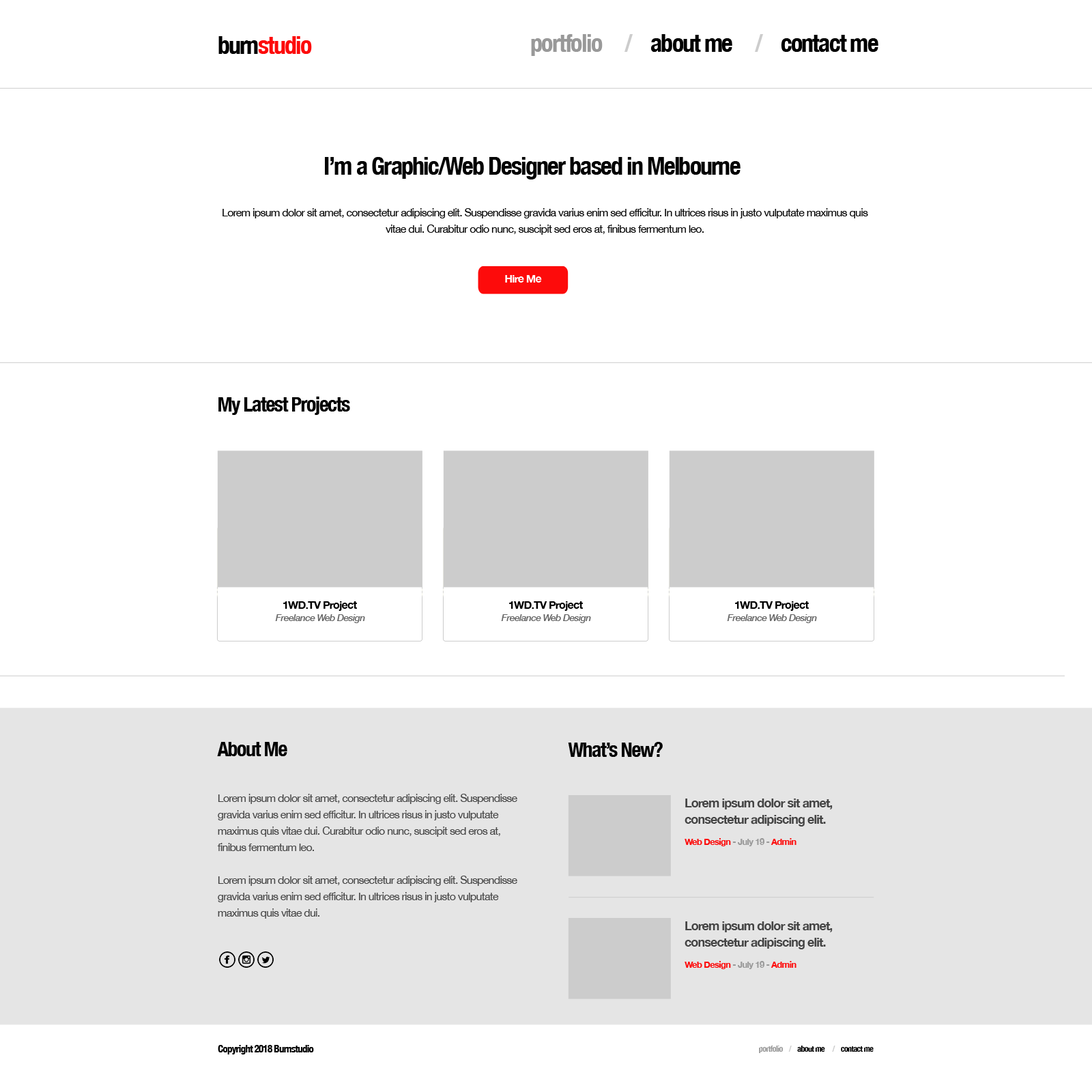
<style>
.page{position:relative;width:1092px;height:1092px;background:#ffffff}
.page>*{position:absolute;margin:0}
.t1{font:24.6px "HelveticaNeue-CondensedBold";letter-spacing:-0.05em;color:#fd0b0b}
.t2{font:24.6px "HelveticaNeue-CondensedBold";letter-spacing:-0.05em;color:#000000}
.t3{font:24.6px "HelveticaNeue-CondensedBold";letter-spacing:-0.05em;color:#999999}
.t4{font:24.6px "HelveticaNeue-CondensedBold";letter-spacing:-0.05em;color:#cccccc}
.t5{font:24.6px "HelveticaNeue-CondensedBold";letter-spacing:-0.05em;color:#020202}
.t6{font:10.9px/16.4px "HelveticaNeue";letter-spacing:-0.05em;color:#020202}
.t7{font:10.9px "HelveticaNeue-Bold";letter-spacing:-0.05em;color:#ffffff}
.t8{font:20.5px "HelveticaNeue-CondensedBold";letter-spacing:-0.05em;color:#020202}
.t9{font:10.9px "HelveticaNeue-Bold";letter-spacing:-0.05em;color:#000000}
.t10{font:9.6px "HelveticaNeue-MediumItalic";letter-spacing:-0.05em;color:#666666}
.t11{font:10.9px/16.4px "HelveticaNeue";letter-spacing:-0.05em;color:#444444}
.t12{font:12.3px/16.4px "HelveticaNeue-Bold";letter-spacing:-0.05em;color:#444444}
.t13{font:8.9px "HelveticaNeue-Bold";letter-spacing:-0.05em;color:#999999}
.t14{font:8.9px "HelveticaNeue-Bold";letter-spacing:-0.05em;color:#fd0b0b}
.t15{font:10.2px "HelveticaNeue-CondensedBold";letter-spacing:-0.05em;color:#020202}
.t16{font:8.2px "HelveticaNeue-CondensedBold";letter-spacing:-0.05em;color:#000000}
.t17{font:8.2px "HelveticaNeue-CondensedBold";letter-spacing:-0.05em;color:#999999}
.t18{font:8.2px "HelveticaNeue-CondensedBold";letter-spacing:-0.05em;color:#cccccc}
</style>
<div class="page">
<p class="t1" style="left:218px;top:36px;width:94px;height:18px"><span class="t2">burn</span>studio</p>
<p class="t2" style="left:531px;top:34px;width:347px;height:22px"><span class="t3">portfolio     </span><span class="t4">/</span>    about me     <span class="t4">/ </span>   contact me</p>
<p class="t5" style="left:325px;top:157px;width:416px;height:22px">I’m a Graphic/Web Designer based in Melbourne</p>
<p class="t6" style="left:222px;top:208px;width:646px;height:27px;text-align:center">Lorem ipsum dolor sit amet, consectetur adipiscing elit. Suspendisse gravida varius enim sed efficitur. In ultrices risus in justo vulputate maximus quis vitae dui. Curabitur odio nunc, suscipit sed eros at, finibus fermentum leo.</p>
<p class="t7" style="left:505px;top:275px;width:37px;height:8px">Hire Me</p>
<p class="t8" style="left:218px;top:397px;width:132px;height:18px">My Latest Projects</p>
<p class="t9" style="left:283px;top:601px;width:74px;height:10px">1WD.TV Project</p>
<p class="t9" style="left:509px;top:601px;width:74px;height:10px">1WD.TV Project</p>
<p class="t9" style="left:735px;top:601px;width:74px;height:10px">1WD.TV Project</p>
<p class="t10" style="left:275px;top:614px;width:90px;height:9px">Freelance Web Design</p>
<p class="t10" style="left:501px;top:614px;width:90px;height:9px">Freelance Web Design</p>
<p class="t10" style="left:727px;top:614px;width:90px;height:9px">Freelance Web Design</p>
<p class="t8" style="left:217px;top:742px;width:70px;height:14px">About Me</p>
<p class="t8" style="left:568px;top:742px;width:95px;height:15px">What’s New?</p>
<p class="t11" style="left:217px;top:794px;width:300px;height:125px">Lorem ipsum dolor sit amet, consectetur adipiscing elit. Suspendisse gravida varius enim sed efficitur. In ultrices risus in justo vulputate maximus quis vitae dui. Curabitur odio nunc, suscipit sed eros at, finibus fermentum leo. <br><br>Lorem ipsum dolor sit amet, consectetur adipiscing elit. Suspendisse gravida varius enim sed efficitur. In ultrices risus in justo vulputate maximus quis vitae dui.</p>
<p class="t12" style="left:685px;top:799px;width:148px;height:27px">Lorem ipsum dolor sit amet, consectetur adipiscing elit.</p>
<p class="t13" style="left:685px;top:838px;width:111px;height:8px"><span class="t14">Web Design</span> - July 19 - <span class="t14">Admin</span></p>
<p class="t12" style="left:685px;top:921px;width:148px;height:28px">Lorem ipsum dolor sit amet, consectetur adipiscing elit.</p>
<p class="t13" style="left:685px;top:961px;width:111px;height:8px"><span class="t14">Web Design</span> - July 19 - <span class="t14">Admin</span></p>
<p class="t15" style="left:218px;top:1045px;width:96px;height:9px">Copyright 2018 Burnstudio</p>
<p class="t16" style="left:759px;top:1046px;width:115px;height:7px"><span class="t17">portfolio    </span><span class="t18">/</span>    about me     <span class="t18">/ </span>   contact me</p>
</div>
